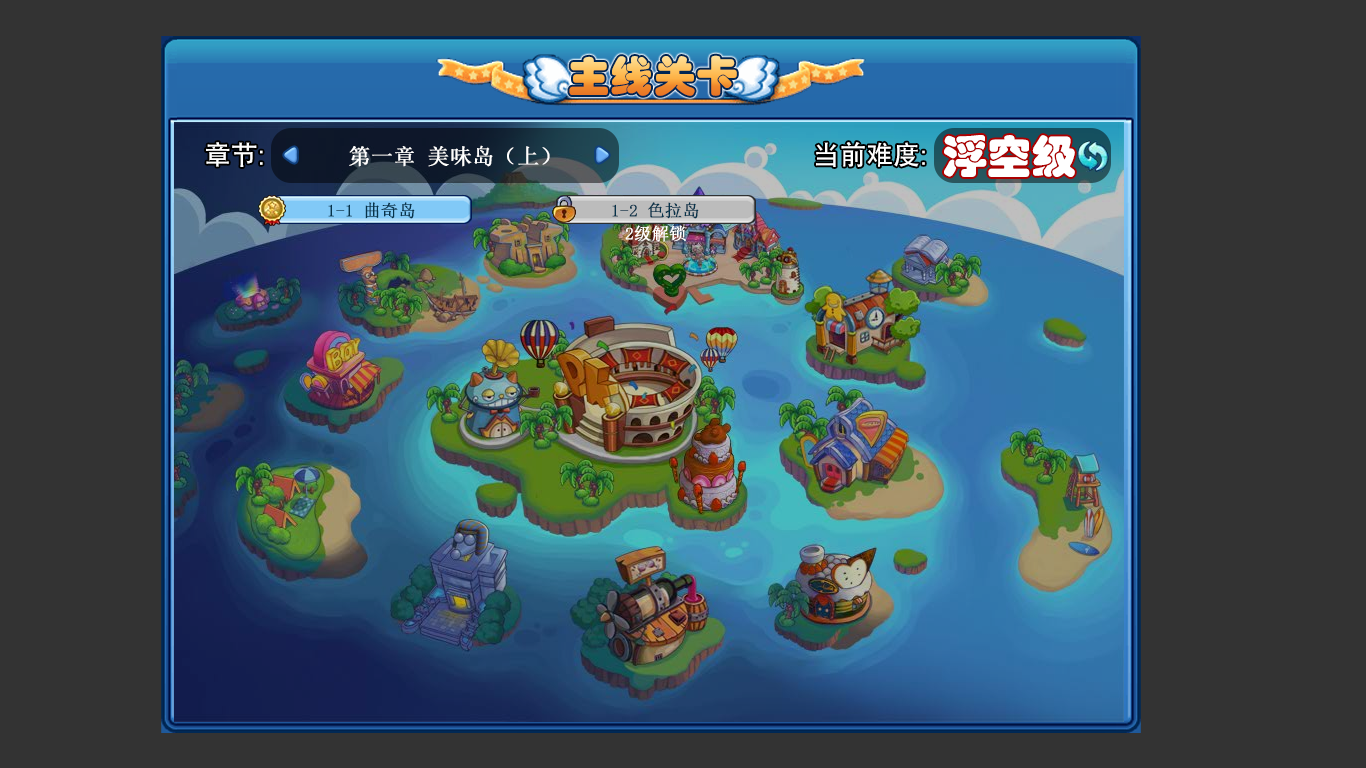
<style>
.page{position:relative;width:1366px;height:768px;background:#333333}
.page>*{position:absolute;margin:0}
.t1{font:41.7px "STHupo";font-weight:bold}
.t2{font:44.8px "STHupo";color:#ffffff}
.t3{font:26.8px "AdobeHeitiStd-Regular";color:#ffffff}
.t4{font:26.8px "ArialMT";color:#ffffff}
.t5{font:21.9px "SimSun";color:#ffffff;font-weight:bold}
.t6{font:17.1px "SimSun";color:#06334b;font-weight:bold}
.t7{font:17.1px "SimSun";color:#ffffff;font-weight:bold}
</style>
<div class="page">
<p class="t1" style="left:569px;top:55px;width:168px;height:41px">主线关卡</p>
<p class="t2" style="left:944px;top:135px;width:131px;height:42px">浮空级</p>
<p class="t3" style="left:206px;top:142px;width:57px;height:25px">章节<span class="t4">:</span></p>
<p class="t5" style="left:349px;top:145px;width:201px;height:22px">第一章 美味岛（上）</p>
<p class="t3" style="left:816px;top:142px;width:109px;height:25px">当前难度<span class="t4">:</span></p>
<p class="t6" style="left:328px;top:202px;width:87px;height:17px">1-1 曲奇岛</p>
<p class="t6" style="left:612px;top:202px;width:87px;height:17px">1-2 色拉岛</p>
<p class="t7" style="left:625px;top:225px;width:61px;height:17px">2级解锁</p>
</div>
